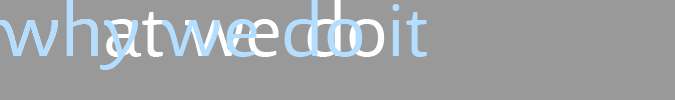
<style>
.page{position:relative;width:675px;height:100px;background:#999999}
.page>*{position:absolute;margin:0}
.t1{font:72px "Kootenay";color:#b3deff}
</style>
<div class="page">
<p class="t1" style="left:0px;top:0px;width:427px;height:70px">why we do it</p>
</div>
